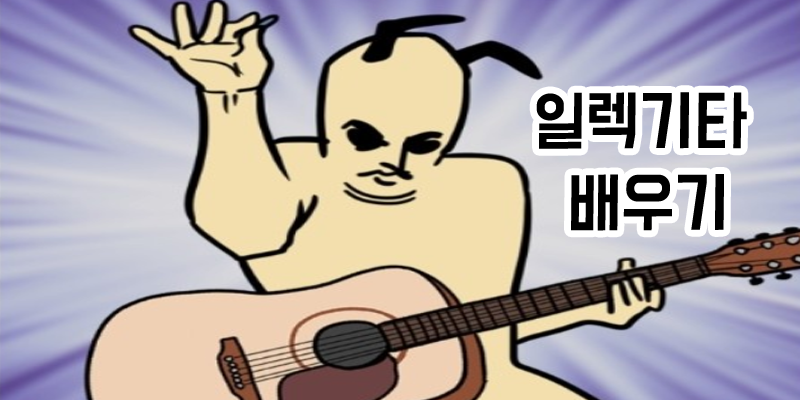
<style>
.page{position:relative;width:800px;height:400px}
.page>*{position:absolute;margin:0}
.t1{font:59px/40.9px "BMDoHyeon";color:#000000;scale:0.95 1}
</style>
<div class="page">
<p class="t1" style="left:536px;top:92px;width:211px;height:139px;text-align:center">일렉기타<br><br> 배우기</p>
</div>
